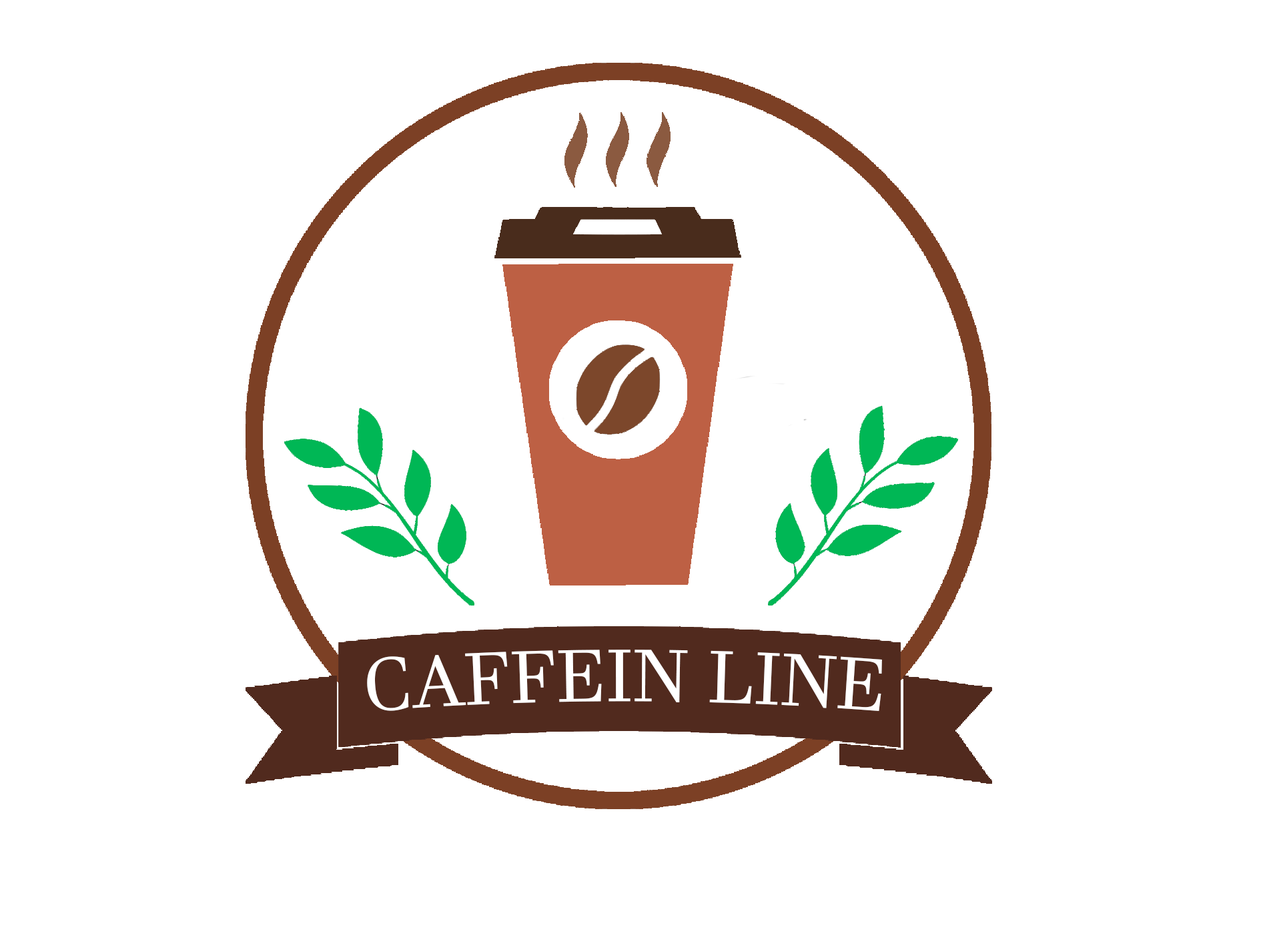
<style>
.page{position:relative;width:1261px;height:946px;background:#ffffff}
.page>*{position:absolute;margin:0}
.t1{font:72.3px "JavaneseText";color:#ffffff}
</style>
<div class="page">
<p class="t1" style="left:367px;top:649px;width:515px;height:62px">CAFFEIN LINE</p>
</div>
